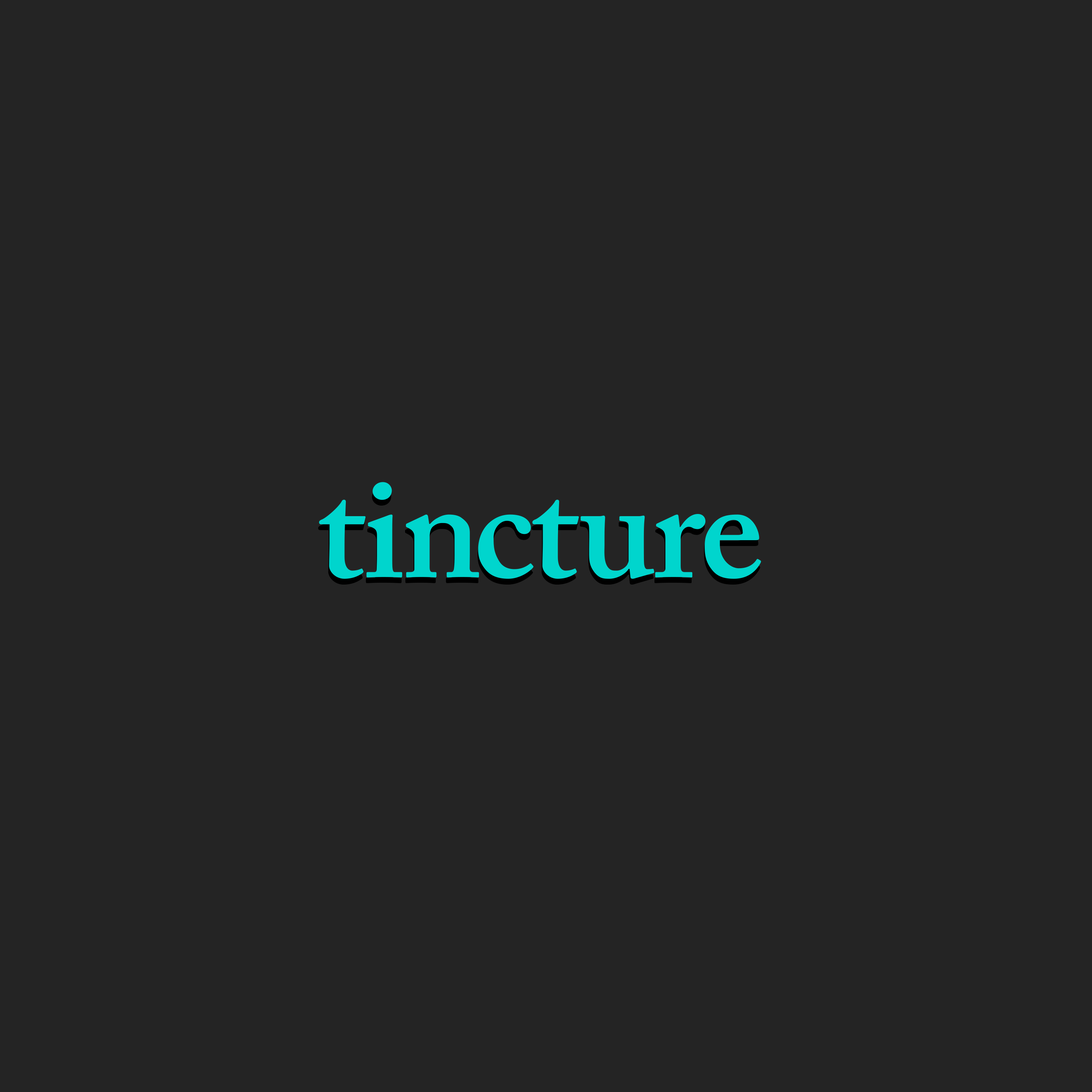
<style>
.page{position:relative;width:1092px;height:1092px;background:#242424}
.page>*{position:absolute;margin:0}
.t1{font:145.6px "ACaslonPro-Semibold";letter-spacing:-0.01em}
.t2{font:145.6px "ACaslonPro-Semibold";letter-spacing:-0.025em}
</style>
<div class="page">
<p class="t1" style="left:318px;top:488px;width:442px;height:97px">ti<span class="t2">nc</span>t<span class="t2">u</span>re</p>
</div>
